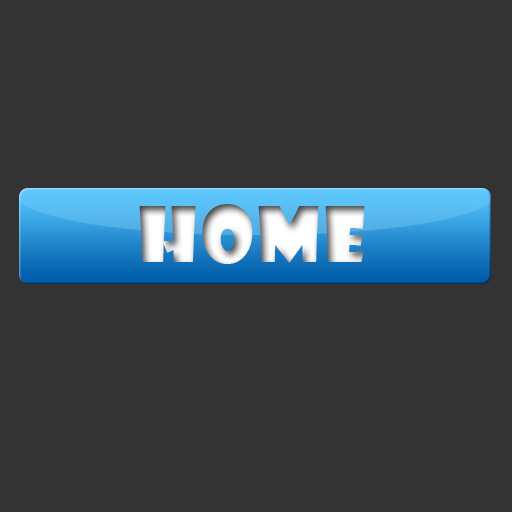
<style>
.page{position:relative;width:512px;height:512px;background:#333333}
.page>*{position:absolute;margin:0}
.t1{font:75.1px "ShowcardGothic-Reg";letter-spacing:0.05em}
</style>
<div class="page">
<p class="t1" style="left:139px;top:204px;width:226px;height:60px">HOME</p>
</div>
